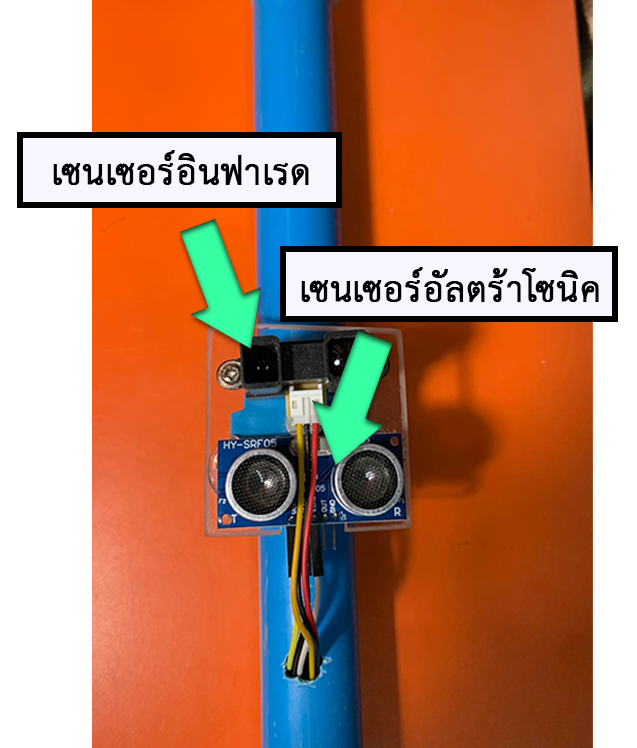
<style>
.page{position:relative;width:637px;height:748px}
.page>*{position:absolute;margin:0}
.t1{font:50.6px "THSarabunPSK";color:#000000;font-weight:bold}
</style>
<div class="page">
<p class="t1" style="left:53px;top:150px;width:256px;height:35px">เซนเซอร์อินฟาเรด</p>
<p class="t1" style="left:301px;top:267px;width:298px;height:35px">เซนเซอร์อัลตร้าโซนิค</p>
</div>
